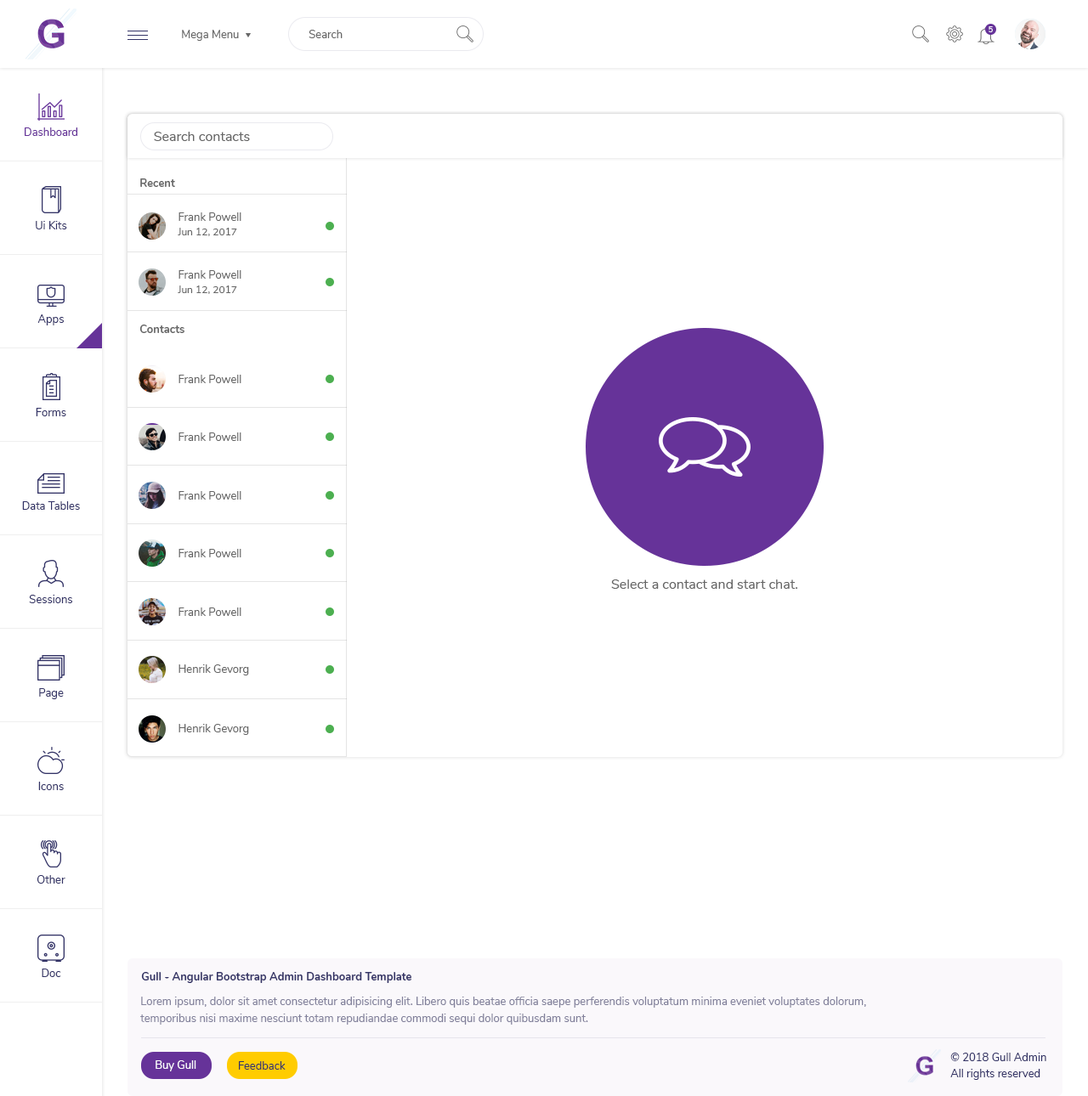
<style>
.page{position:relative;width:1088px;height:1096px;background:#ffffff}
.page>*{position:absolute;margin:0}
.t1{font:11px "Nunito-Regular";color:#666666}
.t2{font:7.6px "Nunito-SemiBold";color:#ffffff}
.t3{font:11px "Nunito-Regular";color:#663399}
.t4{font:13.6px "Nunito-Regular";color:#666666}
.t5{font:11px "Nunito-Bold";color:#666666}
.t6{font:11px "Nunito-Regular";color:#333366}
.t7{font:10.2px "Nunito-Regular";color:#666666}
.t8{font:11px "Nunito-Bold";color:#333366}
.t9{font:11px/17px "Nunito-Regular";color:#82819b}
.t10{font:11px "Nunito-Regular";color:#ffffff}
</style>
<div class="page">
<p class="t1" style="left:182px;top:30px;width:57px;height:11px">Mega Menu</p>
<p class="t1" style="left:308px;top:30px;width:34px;height:8px">Search</p>
<p class="t2" style="left:988px;top:26px;width:5px;height:6px">5</p>
<p class="t3" style="left:25px;top:127px;width:52px;height:9px">Dashboard</p>
<p class="t4" style="left:154px;top:132px;width:96px;height:9px">Search contacts</p>
<p class="t5" style="left:140px;top:178px;width:35px;height:9px">Recent</p>
<p class="t6" style="left:36px;top:221px;width:31px;height:8px">Ui Kits</p>
<p class="t1" style="left:178px;top:212px;width:63px;height:9px">Frank Powell</p>
<p class="t7" style="left:178px;top:228px;width:59px;height:8px">Jun 12, 2017</p>
<p class="t1" style="left:178px;top:270px;width:63px;height:9px">Frank Powell</p>
<p class="t7" style="left:178px;top:286px;width:59px;height:8px">Jun 12, 2017</p>
<p class="t6" style="left:37px;top:314px;width:27px;height:11px">Apps</p>
<p class="t5" style="left:139px;top:325px;width:45px;height:8px">Contacts</p>
<p class="t1" style="left:178px;top:375px;width:63px;height:8px">Frank Powell</p>
<p class="t6" style="left:36px;top:408px;width:30px;height:8px">Forms</p>
<p class="t1" style="left:178px;top:433px;width:63px;height:8px">Frank Powell</p>
<p class="t1" style="left:178px;top:491px;width:63px;height:9px">Frank Powell</p>
<p class="t6" style="left:22px;top:501px;width:58px;height:9px">Data Tables</p>
<p class="t1" style="left:178px;top:549px;width:63px;height:8px">Frank Powell</p>
<p class="t4" style="left:611px;top:580px;width:187px;height:9px">Select a contact and start chat.</p>
<p class="t6" style="left:29px;top:595px;width:43px;height:8px">Sessions</p>
<p class="t1" style="left:178px;top:608px;width:63px;height:8px">Frank Powell</p>
<p class="t1" style="left:178px;top:665px;width:71px;height:11px">Henrik Gevorg</p>
<p class="t6" style="left:39px;top:688px;width:25px;height:11px">Page</p>
<p class="t1" style="left:178px;top:724px;width:71px;height:11px">Henrik Gevorg</p>
<p class="t6" style="left:38px;top:782px;width:26px;height:8px">Icons</p>
<p class="t6" style="left:37px;top:875px;width:28px;height:9px">Other</p>
<p class="t6" style="left:42px;top:969px;width:19px;height:8px">Doc</p>
<p class="t8" style="left:141px;top:972px;width:270px;height:11px">Gull - Angular Bootstrap Admin Dashboard Template</p>
<p class="t9" style="left:140px;top:997px;width:726px;height:28px">Lorem ipsum, dolor sit amet consectetur adipisicing elit. Libero quis beatae officia saepe perferendis voluptatum minima eveniet voluptates dolorum, <br>temporibus nisi maxime nesciunt totam repudiandae commodi sequi dolor quibusdam sunt.</p>
<p class="t10" style="left:156px;top:1061px;width:40px;height:11px">Buy Gull</p>
<p class="t6" style="left:239px;top:1061px;width:47px;height:9px">Feedback</p>
<p class="t6" style="left:950px;top:1053px;width:96px;height:8px">© 2018 Gull Admin</p>
<p class="t6" style="left:950px;top:1069px;width:90px;height:11px">All rights reserved</p>
</div>
